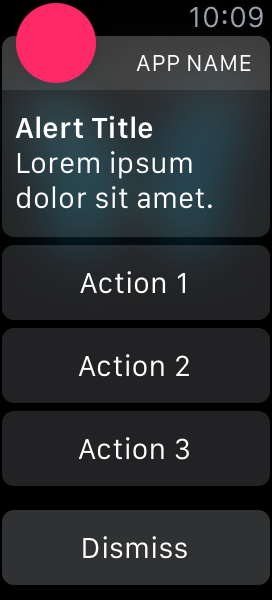
<style>
.page{position:relative;width:272px;height:600px;background:#222224}
.page>*{position:absolute;margin:0}
.t1{font:30px "SFCompactText-Regular";color:#9ba0aa}
.t2{font:24px "SFCompactText-Regular";letter-spacing:0.02em;color:#ffffff;text-transform:uppercase}
.t3{font:30px "SFCompactText-Semibold";letter-spacing:0.004em;color:#ffffff}
.t4{font:30px/35px "SFCompactText-Regular";letter-spacing:0.004em;color:#ffffff}
.t5{font:30px "SFCompactText-Regular";letter-spacing:0.004em;color:#ffffff}
</style>
<div class="page">
<p class="t1" style="left:190px;top:6px;width:73px;height:22px">10:09</p>
<p class="t2" style="left:136px;top:55px;width:115px;height:16px">app name</p>
<p class="t3" style="left:15px;top:115px;width:138px;height:24px">Alert Title</p>
<p class="t4" style="left:16px;top:151px;width:196px;height:58px">Lorem ipsum dolor sit amet.</p>
<p class="t5" style="left:80px;top:271px;width:105px;height:23px">Action 1</p>
<p class="t5" style="left:78px;top:354px;width:111px;height:23px">Action 2</p>
<p class="t5" style="left:78px;top:437px;width:111px;height:23px">Action 3</p>
<p class="t5" style="left:83px;top:536px;width:104px;height:23px">Dismiss</p>
</div>
